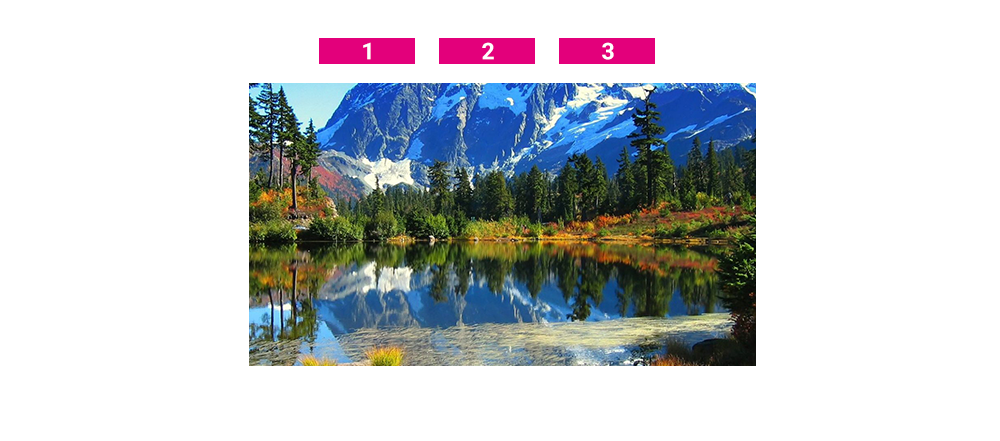
<style>
.page{position:relative;width:1000px;height:441px;background:#ffffff}
.page>*{position:absolute;margin:0}
.t1{font:23px "Roboto-Bold";color:#fefefe}
</style>
<div class="page">
<p class="t1" style="left:363px;top:42px;width:8px;height:18px">1</p>
<p class="t1" style="left:482px;top:42px;width:12px;height:18px">2</p>
</div>
